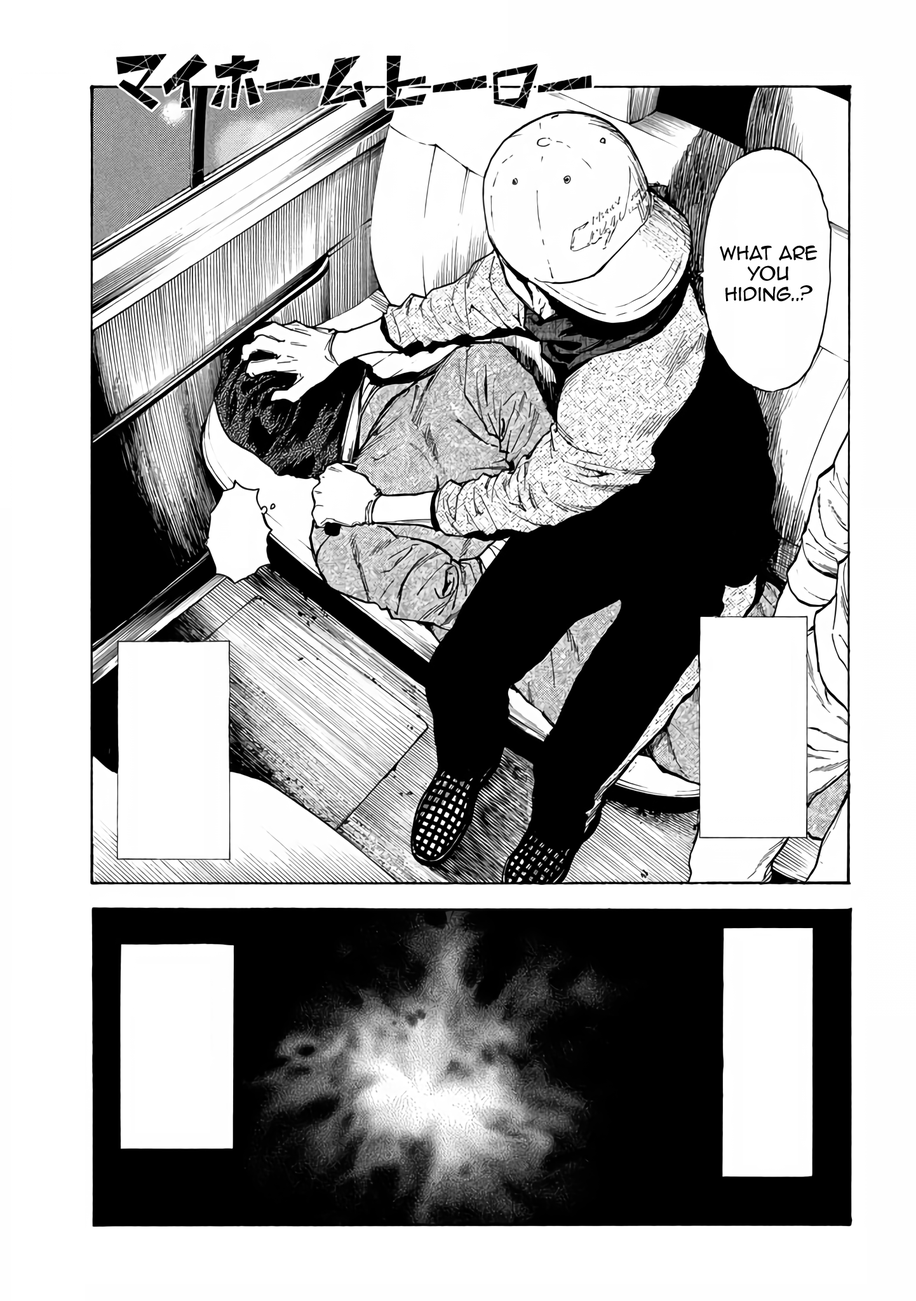
<style>
.page{position:relative;width:916px;height:1301px;background:#ffffff}
.page>*{position:absolute;margin:0}
.t1{font:17.2px "AnimeAce2.0BB";color:#000000}
</style>
<div class="page">
<p class="t1" style="left:720px;top:245px;width:98px;height:57px;text-align:center">What are you hiding..?</p>
</div>
